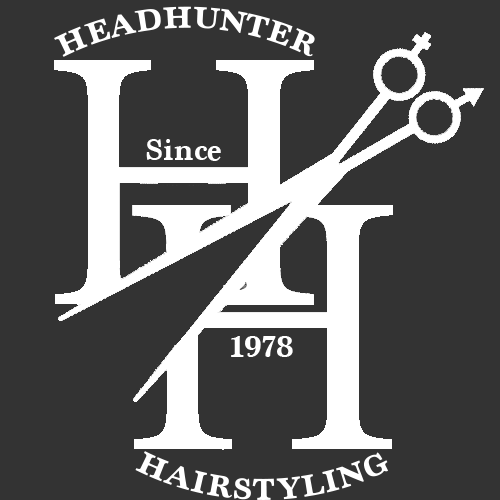
<style>
.page{position:relative;width:500px;height:500px;background:#333333}
.page>*{position:absolute;margin:0}
.t1{font:32px "Marion-Bold";color:#ffffff}
</style>
<div class="page">
<p class="t1" style="left:54px;top:6px;width:261px;height:51px">HEADHUNTER</p>
<p class="t1" style="left:146px;top:139px;width:75px;height:22px">Since</p>
<p class="t1" style="left:231px;top:336px;width:62px;height:21px">1978</p>
<p class="t1" style="left:135px;top:451px;width:254px;height:49px">HAIRSTYLING</p>
</div>
